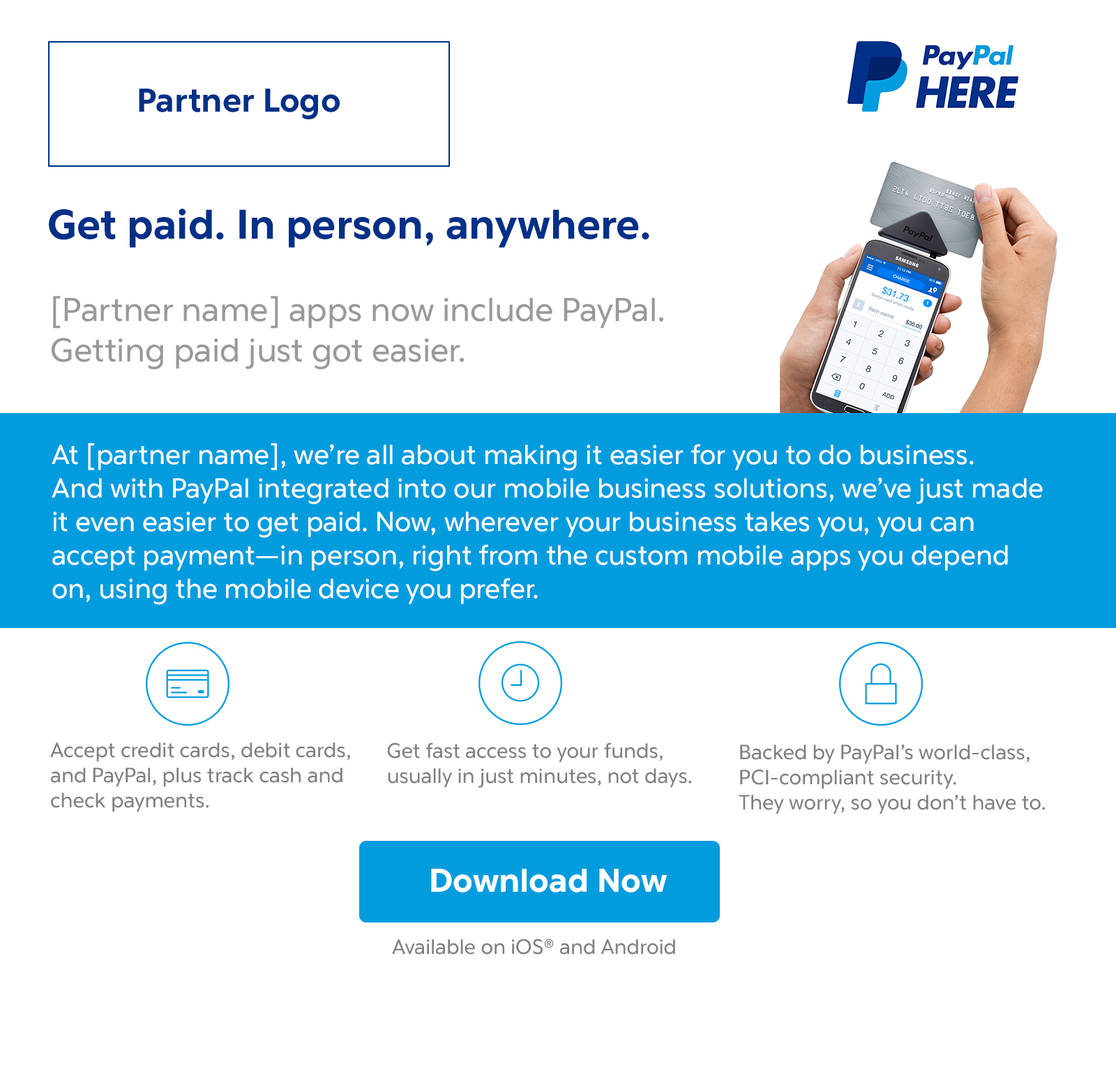
<style>
.page{position:relative;width:1116px;height:1069px;background:#ffffff}
.page>*{position:absolute;margin:0}
.t1{font:33.5px "PayPalForward-Bold";color:#003087}
.t2{font:41.8px "PayPalForward-Bold";color:#003087}
.t3{font:33.5px "PayPalForward-Regular";color:#99999a}
.t4{font:27.9px "PayPalForward-Regular";color:#ffffff}
.t5{font:20.9px "PayPalForward-Regular";color:#808080}
.t6{font:33.5px "PayPalForward-Bold";color:#ffffff}
.t7{font:20.9px "PayPalForward-Bold";color:#ffffff}
</style>
<div class="page">
<p class="t1" style="left:139px;top:89px;width:201px;height:30px">Partner Logo</p>
<p class="t2" style="left:49px;top:209px;width:600px;height:39px">Get paid. In person, anywhere.</p>
<p class="t3" style="left:52px;top:296px;width:611px;height:74px">[Partner name] apps now include PayPal. <br>Getting paid just got easier.</p>
<p class="t4" style="left:52px;top:443px;width:991px;height:162px">At [partner name], we’re all about making it easier for you to do business.<br>And with PayPal integrated into our mobile business solutions, we’ve just made <br>it even easier to get paid. Now, wherever your business takes you, you can <br>accept payment—in person, right from the custom mobile apps you depend <br>on, using the mobile device you prefer.</p>
<p class="t5" style="left:50px;top:742px;width:300px;height:70px">Accept credit cards, debit cards, <br>and PayPal, plus track cash and<br>check payments.</p>
<p class="t5" style="left:387px;top:742px;width:305px;height:45px">Get fast access to your funds,<br>usually in just minutes, not days.</p>
<p class="t5" style="left:739px;top:744px;width:307px;height:70px">Backed by PayPal’s world-class,<br>PCI-compliant security.<br>They worry, so you don’t have to.</p>
<p class="t6" style="left:431px;top:868px;width:236px;height:24px">Download Now</p>
<p class="t5" style="left:392px;top:938px;width:283px;height:16px"><span class="t7"><br></span>Available on iOS® and Android</p>
</div>
